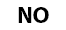
<style>
.page{position:relative;width:66px;height:30px;background:#ffffff}
.page>*{position:absolute;margin:0}
.t1{font:23px "MyriadPro-Bold";color:#000000}
</style>
<div class="page">
<p class="t1" style="left:18px;top:7px;width:31px;height:16px">NO</p>
</div>
